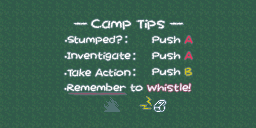
<style>
.page{position:relative;width:256px;height:128px;background:#315a4a}
.page>*{position:absolute;margin:0}
.t1{font:10.8px "Chalktastic";color:#ffffff;scale:2.49 1}
.t2{font:10.7px "Chalktastic";color:#ffffff;scale:1.15 1}
.t3{font:8.5px "Chalktastic";color:#ffffff;scale:1.15 1}
.t4{font:8.5px "MyriadPro-Regular";color:#ffffff;scale:1.15 1}
.t5{font:8.5px "Chalktastic";color:#f7295a;scale:1.15 1}
.t6{font:8.5px "Chalktastic";color:#cec618;scale:1.15 1}
.t7{font:8.5px "Chalktastic";color:#f7f7ff;scale:1.15 1}
.t8{font:8.1px "Chalktastic";color:#94526b;scale:14.39 1}
</style>
<div class="page">
<p class="t1" style="left:73px;top:22px;width:15px;height:3px">-</p>
<p class="t2" style="left:91px;top:19px;width:74px;height:11px">Camp Tips</p>
<p class="t1" style="left:169px;top:22px;width:15px;height:3px">-</p>
<p class="t3" style="left:65px;top:35px;width:58px;height:10px"><span class="t4">•</span>Stumped?</p>
<p class="t3" style="left:152px;top:35px;width:41px;height:9px">Push <span class="t5">A</span></p>
<p class="t3" style="left:64px;top:52px;width:67px;height:9px"><span class="t4">•</span>Inventigate</p>
<p class="t3" style="left:152px;top:51px;width:41px;height:9px">Push <span class="t5">A</span></p>
<p class="t3" style="left:64px;top:68px;width:67px;height:9px"><span class="t4">•</span>Take Action</p>
<p class="t3" style="left:152px;top:67px;width:40px;height:9px">Push <span class="t6">B</span></p>
<p class="t3" style="left:64px;top:83px;width:79px;height:9px"><span class="t4">•</span>Remember to</p>
<p class="t7" style="left:147px;top:83px;width:44px;height:9px">Whistle!</p>
<p class="t8" style="left:68px;top:93px;width:59px;height:2px">-</p>
</div>
